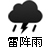
<style>
.page{position:relative;width:50px;height:48px;background:#ffffff}
.page>*{position:absolute;margin:0}
.t1{font:12px "OPPOSans-R";color:#000000}
</style>
<div class="page">
<p class="t1" style="left:8px;top:36px;width:34px;height:11px">雷阵雨</p>
</div>
